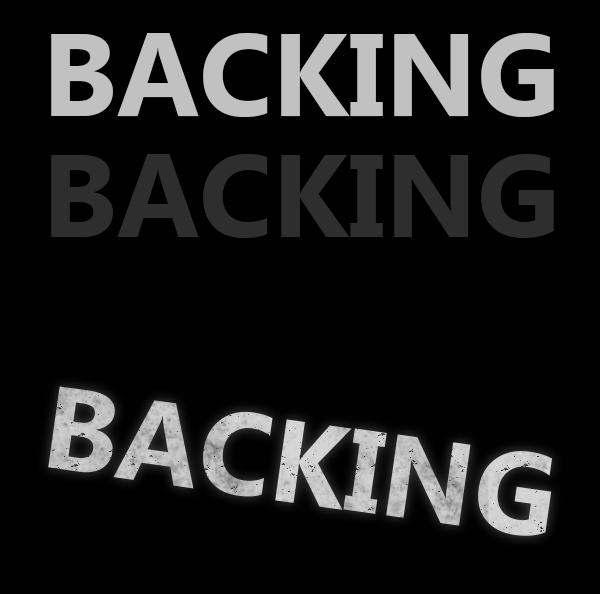
<style>
.page{position:relative;width:600px;height:594px;background:#000000}
.page>*{position:absolute;margin:0}
.t1{font:116.7px "Ebrima-Bold";color:#c1c1c1}
.t2{font:116.7px "Ebrima-Bold";color:#2e2e2e}
</style>
<div class="page">
<p class="t1" style="left:51px;top:33px;width:503px;height:84px">BACKING</p>
<p class="t2" style="left:51px;top:154px;width:503px;height:84px">BACKING</p>
</div>
